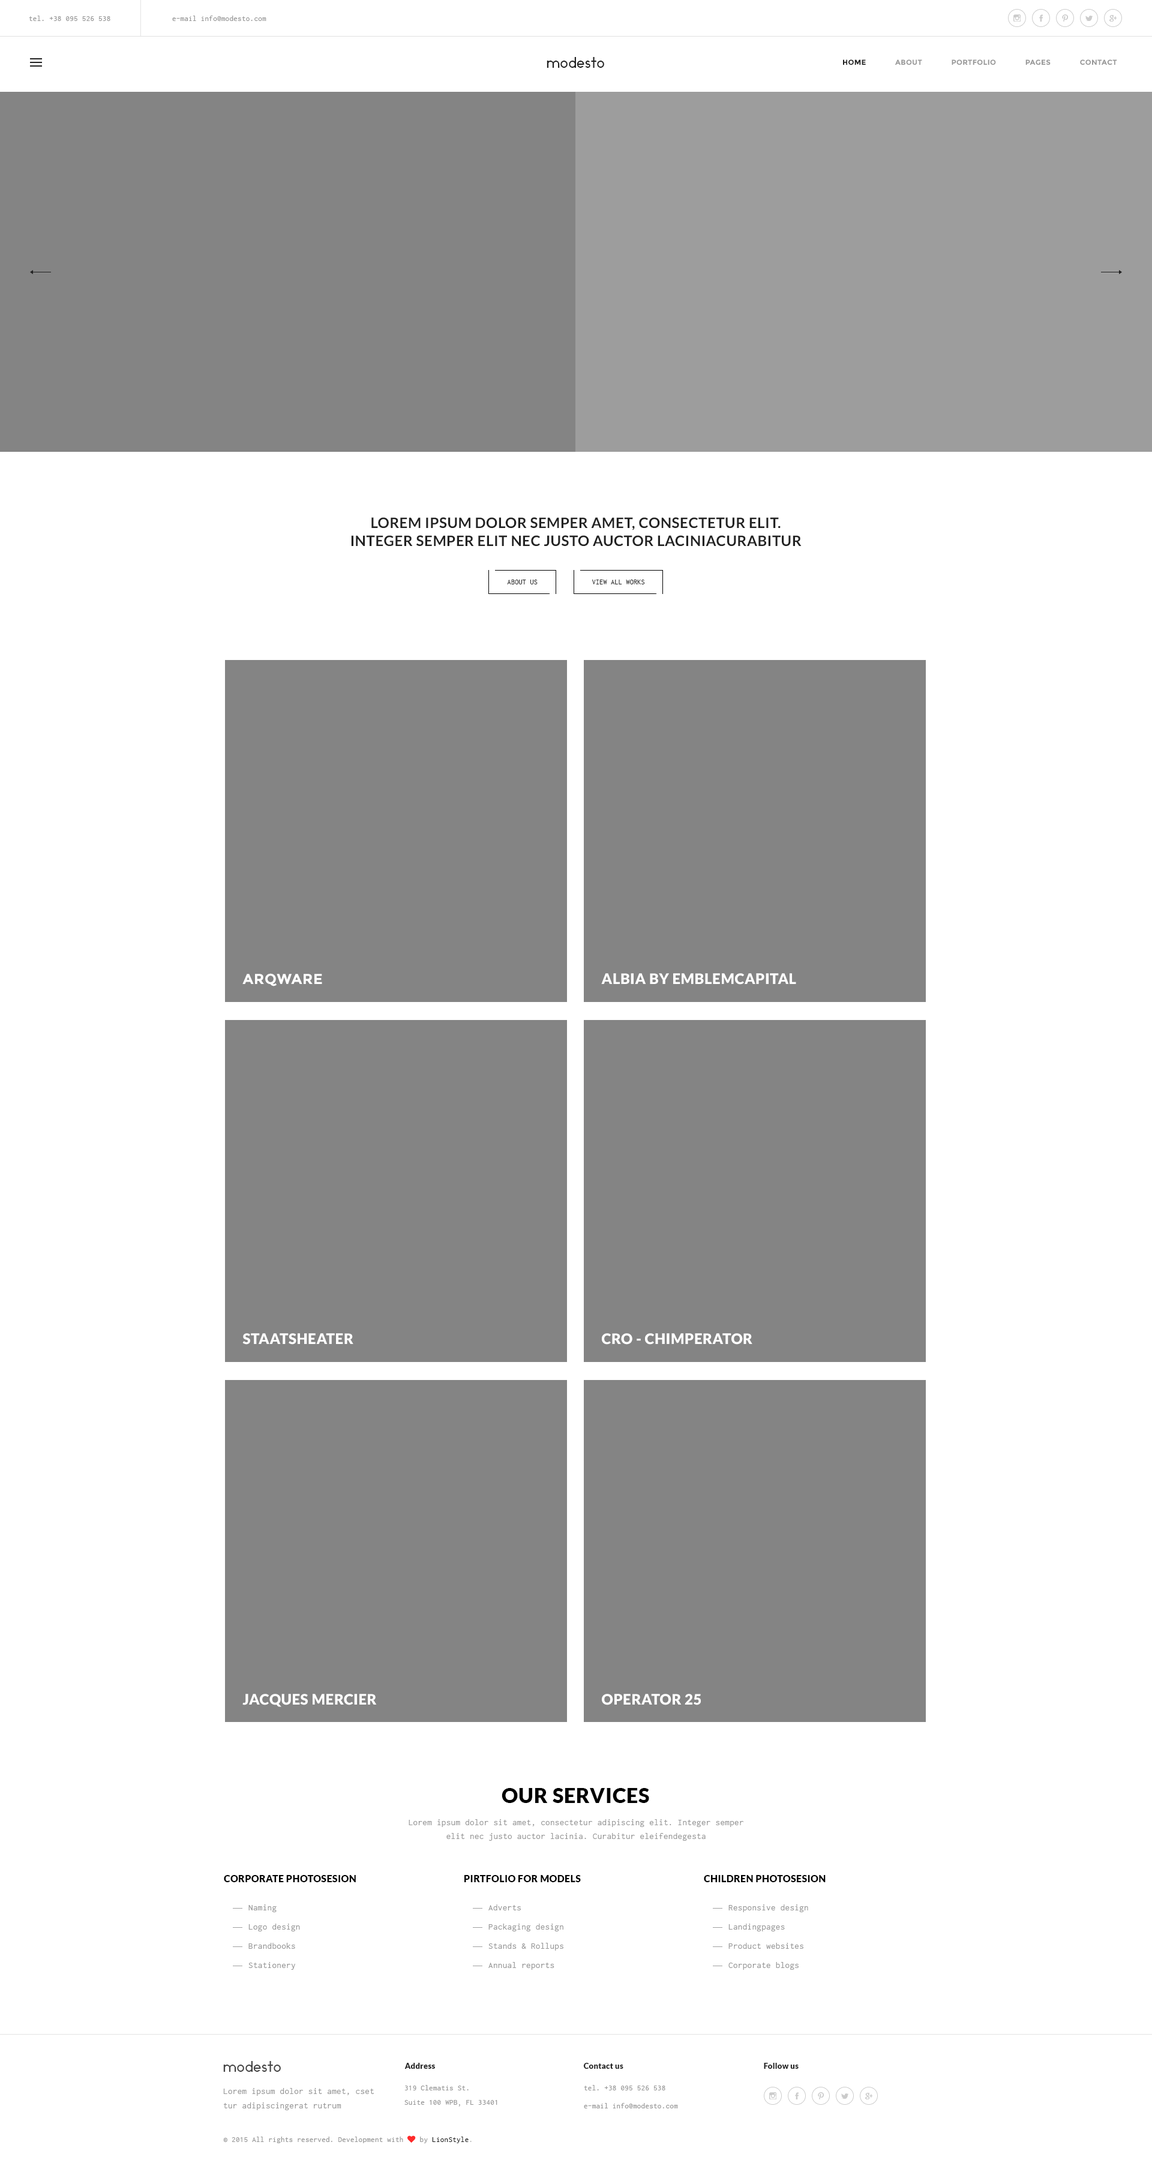
<style>
.page{position:relative;width:1152px;height:2172px;background:#ffffff}
.page>*{position:absolute;margin:0}
.t1{font:7.8px "Inconsolata";letter-spacing:0.025em;color:#989898}
.t2{font:14.4px "Ikaros";letter-spacing:0.025em;color:#222222}
.t3{font:7.2px "Montserrat-Bold";letter-spacing:0.025em;color:#989898;text-transform:uppercase}
.t4{font:7.2px "Montserrat-Bold";letter-spacing:0.025em;color:#222222;text-transform:uppercase}
.t5{font:14.4px/18px "Lato-Bold";letter-spacing:0.025em;color:#222222;text-transform:uppercase}
.t6{font:7.2px "Inconsolata";letter-spacing:0.025em;color:#222222;text-transform:uppercase}
.t7{font:14.4px "Montserrat-Bold";letter-spacing:0.025em;color:#ffffff;text-transform:uppercase}
.t8{font:14.4px "Lato-Black";letter-spacing:0.025em;color:#ffffff;text-transform:uppercase}
.t9{font:20.4px "Lato-Black";letter-spacing:0.025em;color:#000000;text-transform:uppercase}
.t10{font:9px/13.9px "Inconsolata";letter-spacing:0.025em;color:#989898}
.t11{font:9.6px "Lato-Black";letter-spacing:0.025em;color:#000000;text-transform:uppercase}
.t12{font:9px/19.2px "Inconsolata";letter-spacing:0.025em;color:#989898}
.t13{font:14.4px "Ikaros";letter-spacing:0.025em;color:#444444}
.t14{font:7.8px "Lato-Black";letter-spacing:0.025em;color:#222222}
.t15{font:9px/14.4px "Inconsolata";letter-spacing:0.025em;color:#989898}
.t16{font:7.8px/14.4px "Inconsolata";letter-spacing:0.025em;color:#989898}
.t17{font:7.8px/18px "Inconsolata";letter-spacing:0.025em;color:#989898}
.t18{font:7.8px "FontAwesome";letter-spacing:0.025em;color:#fe2b2b}
.t19{font:7.8px "Inconsolata";letter-spacing:0.025em;color:#222222}
.t20{font:7.8px "Inconsolata";letter-spacing:0.025em;color:#b5b5b5}
</style>
<div class="page">
<p class="t1" style="left:29px;top:16px;width:237px;height:5px">tel. +38 095 526 538               e-mail info@modesto.com</p>
<p class="t2" style="left:547px;top:57px;width:57px;height:11px">modesto</p>
<p class="t3" style="left:843px;top:59px;width:274px;height:6px"><span class="t4">home              </span>about              portfolio              pages              contact</p>
<p class="t5" style="left:351px;top:517px;width:451px;height:29px;text-align:center">Lorem ipsum dolor semper amet, consectetur elit. Integer semper elit nec justo auctor laciniaCurabitur eleifend, tortor eu eleifend egestas</p>
<p class="t6" style="left:507px;top:580px;width:31px;height:4px">about us</p>
<p class="t6" style="left:592px;top:580px;width:53px;height:4px">view all works</p>
<p class="t7" style="left:242px;top:973px;width:80px;height:13px">ARQWARE</p>
<p class="t8" style="left:601px;top:973px;width:195px;height:12px">albia by emblemcapital</p>
<p class="t8" style="left:242px;top:1333px;width:111px;height:12px">staatsheater</p>
<p class="t8" style="left:602px;top:1333px;width:150px;height:12px">Cro - Chimperator</p>
<p class="t8" style="left:242px;top:1694px;width:135px;height:13px">jacques mercier</p>
<p class="t8" style="left:602px;top:1694px;width:99px;height:11px">operator 25</p>
<p class="t9" style="left:502px;top:1788px;width:147px;height:15px">our services</p>
<p class="t10" style="left:409px;top:1819px;width:334px;height:22px;text-align:center">Lorem ipsum dolor sit amet, consectetur adipiscing elit. Integer semper elit nec justo auctor lacinia. Curabitur eleifendegesta</p>
<p class="t11" style="left:224px;top:1875px;width:132px;height:7px">CORPORATE photosesion</p>
<p class="t11" style="left:464px;top:1875px;width:117px;height:7px">pirtfolio for models</p>
<p class="t11" style="left:704px;top:1875px;width:122px;height:7px">children photosesion</p>
<p class="t12" style="left:248px;top:1904px;width:52px;height:66px">Naming<br>Logo design<br>Brandbooks<br>Stationery<br>Company documents</p>
<p class="t12" style="left:488px;top:1904px;width:75px;height:66px">Adverts<br>Packaging design<br>Stands &amp; Rollups<br>Annual reports<br>Company documents</p>
<p class="t12" style="left:728px;top:1904px;width:80px;height:66px">Responsive design<br>Landingpages<br>Product websites<br>Corporate blogs<br>Company documents</p>
<p class="t13" style="left:223px;top:2061px;width:58px;height:11px">modesto</p>
<p class="t14" style="left:404px;top:2063px;width:31px;height:6px">Address</p>
<p class="t14" style="left:583px;top:2063px;width:40px;height:6px">Contact us</p>
<p class="t14" style="left:764px;top:2063px;width:35px;height:6px">Follow us</p>
<p class="t15" style="left:223px;top:2088px;width:151px;height:22px">Lorem ipsum dolor sit amet, cset tur adipiscingerat rutrum</p>
<p class="t16" style="left:404px;top:2085px;width:93px;height:22px">319 Clematis St.<br>Suite 100 WPB, FL 33401</p>
<p class="t17" style="left:584px;top:2085px;width:94px;height:23px">tel. +38 095 526 538<br>e-mail info@modesto.com</p>
<p class="t1" style="left:223px;top:2135px;width:249px;height:8px">© 2015 All rights reserved. Development with <span class="t18">♥ </span>by<span class="t19"> LionStyle</span><span class="t20">.</span></p>
</div>
